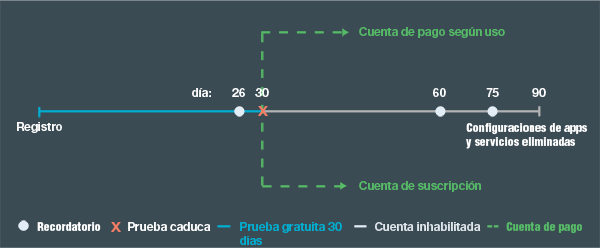
<style>
.page{position:relative;width:600px;height:248px;background:#3b4b54}
.page>*{position:absolute;margin:0}
.t1{font:11.9px "HelvNeueBoldforIBM";color:#56bb66}
.t2{font:11.9px "HelvNeueBoldforIBM";color:#ffffff}
.t3{font:12.7px "HelvNeueBoldforIBM";color:#f47d64;scale:1.17 1}
.t4{font:11.9px "Helvetica-Condensed-Black";color:#ffffff}
.t5{font:11.9px "HelvNeueBoldforIBM";color:#00aed1}
.t6{font:11.9px "HelvNeueBoldforIBM";color:#dfe6eb}
.t7{font:11.9px "Helvetica-Condensed-Black";color:#56bb66}
</style>
<div class="page">
<p class="t1" style="left:359px;top:26px;width:146px;height:12px">Cuenta de pago según uso</p>
<p class="t2" style="left:192px;top:88px;width:19px;height:9px">día:</p>
<p class="t2" style="left:232px;top:88px;width:13px;height:9px">26</p>
<p class="t2" style="left:255px;top:88px;width:14px;height:9px">30</p>
<p class="t2" style="left:433px;top:88px;width:13px;height:9px">60</p>
<p class="t2" style="left:486px;top:88px;width:13px;height:9px">75</p>
<p class="t2" style="left:532px;top:88px;width:14px;height:9px">90</p>
<p class="t3" style="left:258px;top:106px;width:10px;height:10px">X</p>
<p class="t2" style="left:17px;top:122px;width:45px;height:11px">Registro</p>
<p class="t4" style="left:466px;top:123px;width:122px;height:26px">Configuraciones de apps<br>y servicios eliminadas</p>
<p class="t1" style="left:359px;top:181px;width:122px;height:11px">Cuenta de suscripción</p>
<p class="t4" style="left:37px;top:222px;width:64px;height:9px">Recordatorio</p>
<p class="t3" style="left:111px;top:222px;width:10px;height:10px">X</p>
<p class="t2" style="left:128px;top:222px;width:83px;height:9px">Prueba caduca</p>
<p class="t5" style="left:240px;top:222px;width:102px;height:23px">Prueba gratuita 30  <br>días</p>
<p class="t6" style="left:375px;top:222px;width:106px;height:9px">Cuenta inhabilitada</p>
<p class="t7" style="left:506px;top:222px;width:76px;height:12px">Cuenta de pago</p>
</div>
